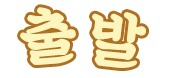
<style>
.page{position:relative;width:170px;height:78px;background:#ffffff}
.page>*{position:absolute;margin:0}
.t1{font:61px "SDKukdetopokki-aLt";letter-spacing:0.1em;color:#fcf5bd;font-weight:bold}
</style>
<div class="page">
<p class="t1" style="left:20px;top:7px;width:56px;height:58px;rotate:-4deg">출</p>
<p class="t1" style="left:92px;top:12px;width:54px;height:56px;rotate:6deg">발</p>
</div>
